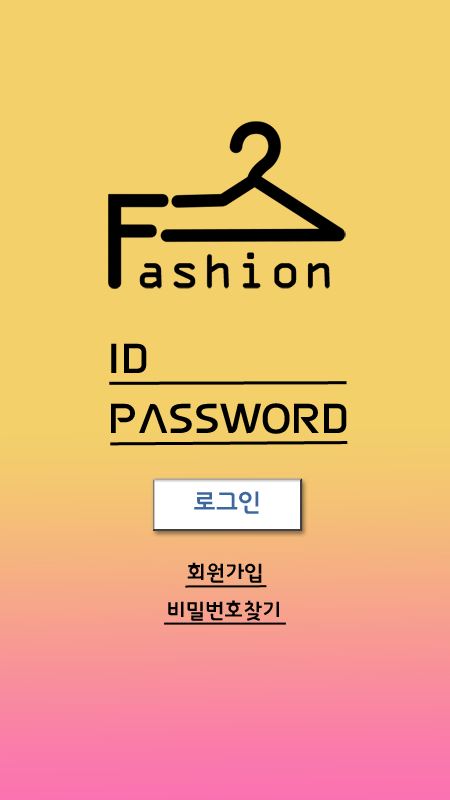
<style>
.page{position:relative;width:450px;height:800px;background:#f3d06a}
.page>*{position:absolute;margin:0}
.t1{font:41.7px "InterGTB";color:#000000}
.t2{font:25px "InterGTB";color:#3d679f}
.t3{font:20.8px "InterGTB";color:#000000}
</style>
<div class="page">
<p class="t1" style="left:111px;top:343px;width:36px;height:30px">ID</p>
<p class="t1" style="left:111px;top:403px;width:236px;height:31px">PASSWORD</p>
<p class="t2" style="left:194px;top:491px;width:65px;height:23px">로그인</p>
<p class="t3" style="left:187px;top:562px;width:75px;height:21px">회원가입</p>
<p class="t3" style="left:168px;top:600px;width:111px;height:21px">비밀번호찾기</p>
</div>
